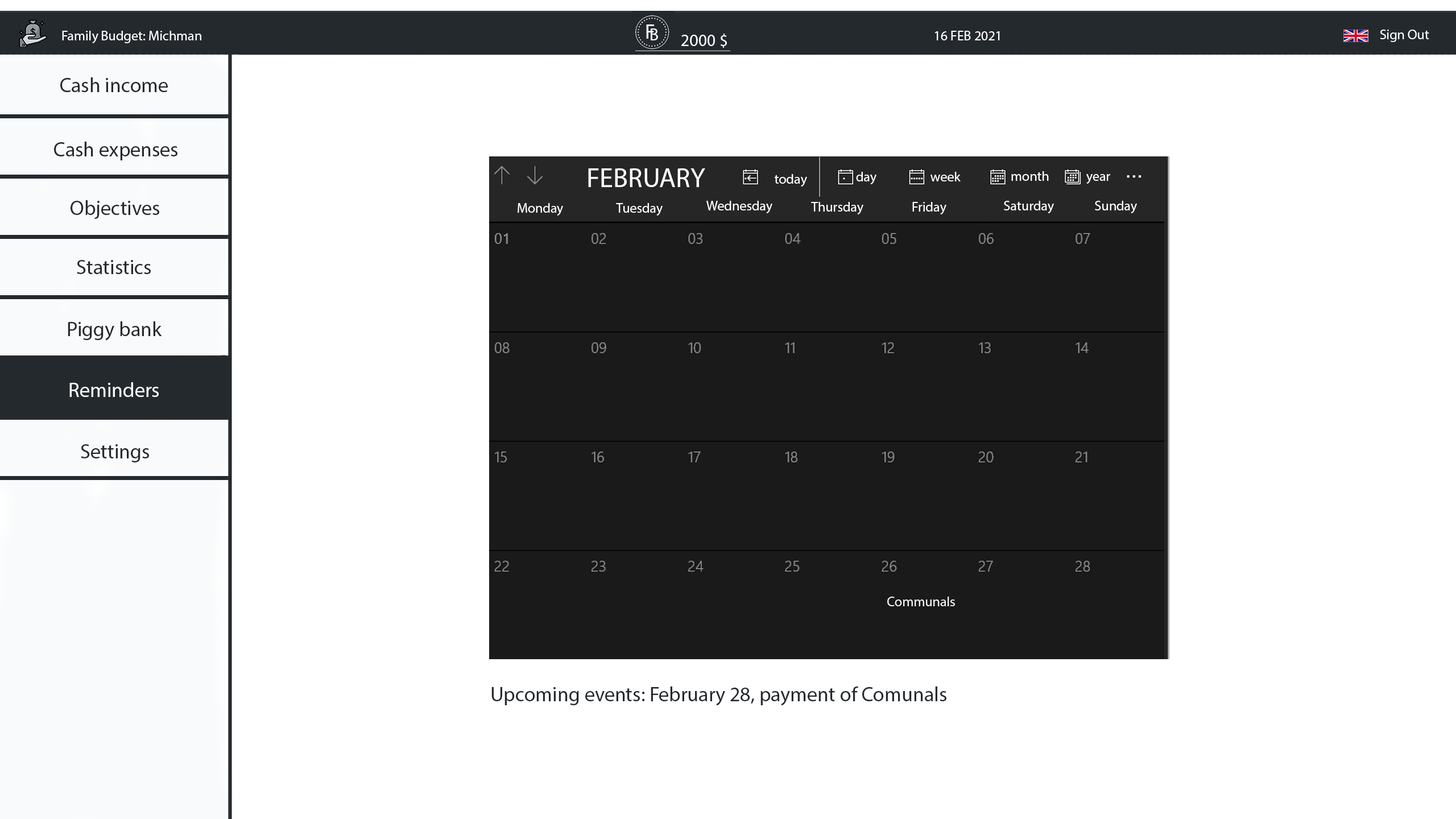
<style>
.page{position:relative;width:1456px;height:819px;background:#ffffff}
.page>*{position:absolute;margin:0}
.t1{font:13.6px "MyriadPro-Regular";color:#f8fafb}
.t2{font:13.6px "MyriadPro-Regular";color:#ffffff}
.t3{font:17.1px "MyriadPro-Regular";color:#ffffff}
.t4{font:20.5px "MyriadPro-Regular";color:#24292e}
.t5{font:27.3px "MyriadPro-Regular";color:#ffffff}
.t6{font:20.5px "MyriadPro-Regular";color:#ffffff}
.t7{font:13.6px "MyriadPro-Regular";color:#f2f2f2}
</style>
<div class="page">
<p class="t1" style="left:1380px;top:30px;width:49px;height:12px">Sign Out</p>
<p class="t2" style="left:62px;top:31px;width:139px;height:12px">Family Budget: Michman</p>
<p class="t3" style="left:681px;top:34px;width:46px;height:14px">2000 $</p>
<p class="t2" style="left:935px;top:31px;width:65px;height:9px">16 FEB 2021</p>
<p class="t4" style="left:60px;top:77px;width:108px;height:15px">Cash income</p>
<p class="t4" style="left:54px;top:142px;width:123px;height:18px">Cash expenses</p>
<p class="t5" style="left:588px;top:168px;width:117px;height:19px">FEBRUARY</p>
<p class="t2" style="left:856px;top:172px;width:20px;height:12px">day</p>
<p class="t2" style="left:930px;top:172px;width:31px;height:9px">week</p>
<p class="t2" style="left:1011px;top:171px;width:38px;height:10px">month</p>
<p class="t2" style="left:774px;top:174px;width:33px;height:13px">today</p>
<p class="t2" style="left:1086px;top:174px;width:24px;height:10px">year</p>
<p class="t4" style="left:71px;top:200px;width:88px;height:19px">Objectives</p>
<p class="t2" style="left:518px;top:203px;width:45px;height:13px">Monday</p>
<p class="t2" style="left:616px;top:203px;width:47px;height:13px">Tuesday</p>
<p class="t2" style="left:706px;top:201px;width:66px;height:12px">Wednesday</p>
<p class="t2" style="left:811px;top:202px;width:52px;height:12px">Thursday</p>
<p class="t2" style="left:912px;top:202px;width:34px;height:12px">Friday</p>
<p class="t2" style="left:1004px;top:201px;width:50px;height:12px">Saturday</p>
<p class="t2" style="left:1095px;top:201px;width:42px;height:12px">Sunday</p>
<p class="t4" style="left:77px;top:260px;width:74px;height:14px">Statistics</p>
<p class="t4" style="left:68px;top:321px;width:94px;height:20px">Piggy bank</p>
<p class="t6" style="left:69px;top:382px;width:90px;height:15px">Reminders</p>
<p class="t4" style="left:81px;top:444px;width:68px;height:18px">Settings</p>
<p class="t7" style="left:887px;top:597px;width:68px;height:9px">Communals</p>
<p class="t4" style="left:491px;top:686px;width:455px;height:20px">Upcoming events: February 28, payment of Comunals</p>
</div>
